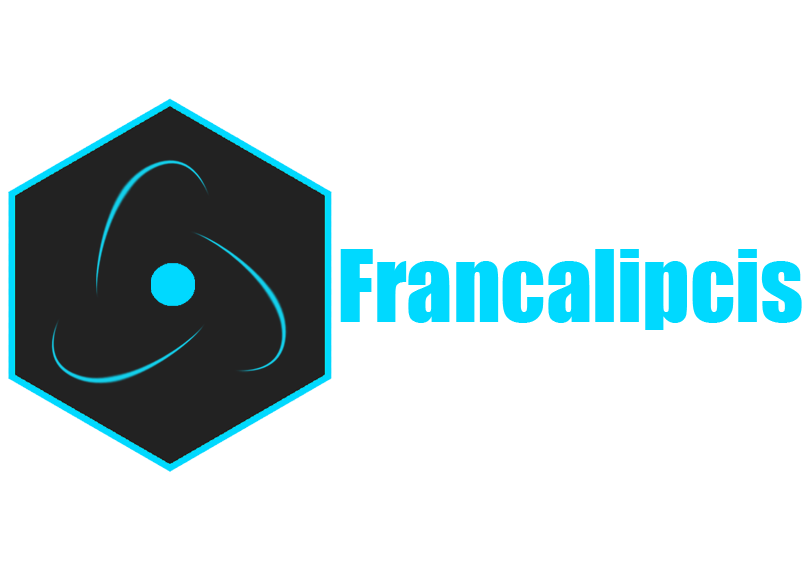
<style>
.page{position:relative;width:809px;height:564px;background:#ffffff}
.page>*{position:absolute;margin:0}
.t1{font:91.6px "Impact";color:#00d9ff}
</style>
<div class="page">
<p class="t1" style="left:340px;top:249px;width:462px;height:81px">Francalipcis</p>
</div>
